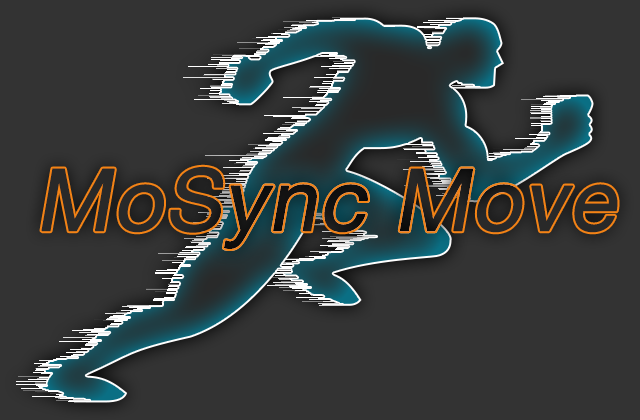
<style>
.page{position:relative;width:640px;height:420px;background:#333333}
.page>*{position:absolute;margin:0}
.t1{font:86px "HelveticaNeueLTPro-Roman";color:#282828;font-weight:bold;font-style:italic}
</style>
<div class="page">
<p class="t1" style="left:41px;top:166px;width:577px;height:83px">MoSync Move</p>
</div>
